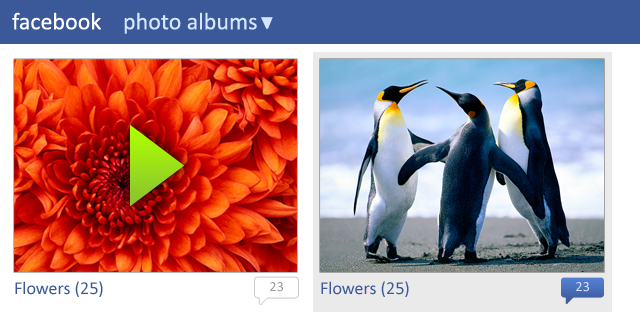
<style>
.page{position:relative;width:640px;height:320px}
.page>*{position:absolute;margin:0}
.t1{font:24px "Calibri";color:#ffffff}
.t2{font:24px "Calibri";color:#d6e5ff}
.t3{font:18px "Calibri";color:#3b5998}
.t4{font:14px "Calibri";color:#999999}
.t5{font:14px "Calibri";color:#d6e5ff}
</style>
<div class="page">
<p class="t1" style="left:12px;top:12px;width:89px;height:18px">facebook</p>
<p class="t2" style="left:124px;top:12px;width:133px;height:22px">photo albums</p>
<p class="t3" style="left:15px;top:281px;width:88px;height:16px">Flowers (25)</p>
<p class="t3" style="left:321px;top:281px;width:88px;height:16px">Flowers (25)</p>
<p class="t4" style="left:270px;top:282px;width:13px;height:10px">23</p>
<p class="t5" style="left:576px;top:282px;width:13px;height:10px">23</p>
</div>
